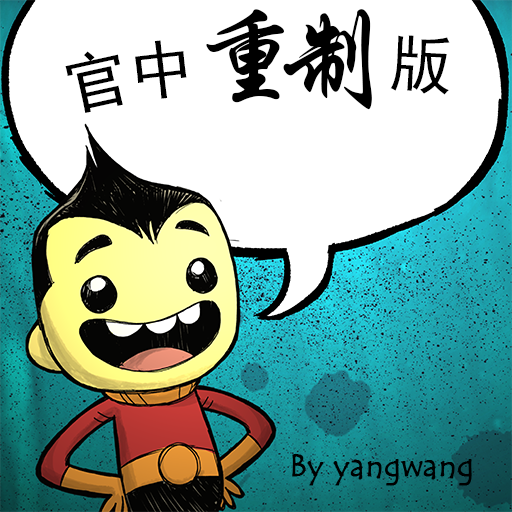
<style>
.page{position:relative;width:512px;height:512px;background:#ffffff}
.page>*{position:absolute;margin:0}
.t1{font:109.3px "STXingkai";letter-spacing:-0.2em;color:#000000}
.t2{font:64px "SimHei";color:#000000}
.t3{font:32px "TempusSansITC";color:#000000;font-weight:bold}
</style>
<div class="page">
<p class="t1" style="left:206px;top:9px;width:166px;height:101px">重制</p>
<p class="t2" style="left:65px;top:35px;width:385px;height:78px">官中      版</p>
<p class="t3" style="left:292px;top:454px;width:180px;height:32px">By yangwang</p>
</div>
